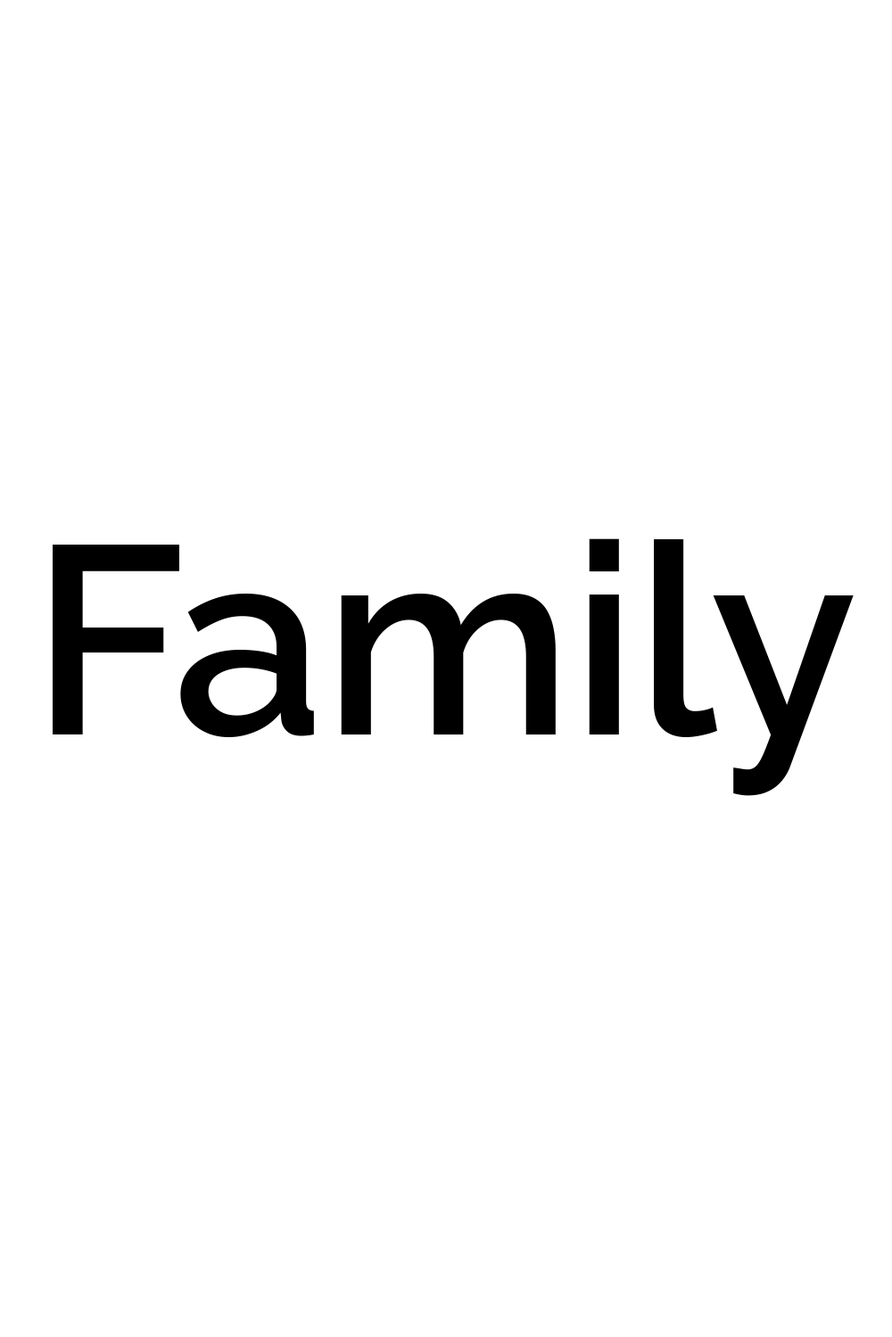
<style>
.page{position:relative;width:892px;height:1337px;background:#ffffff}
.page>*{position:absolute;margin:0}
.t1{font:267.5px "Raleway-SemiBold";color:#000000}
</style>
<div class="page">
<p class="t1" style="left:53px;top:539px;width:800px;height:257px">Family</p>
</div>
